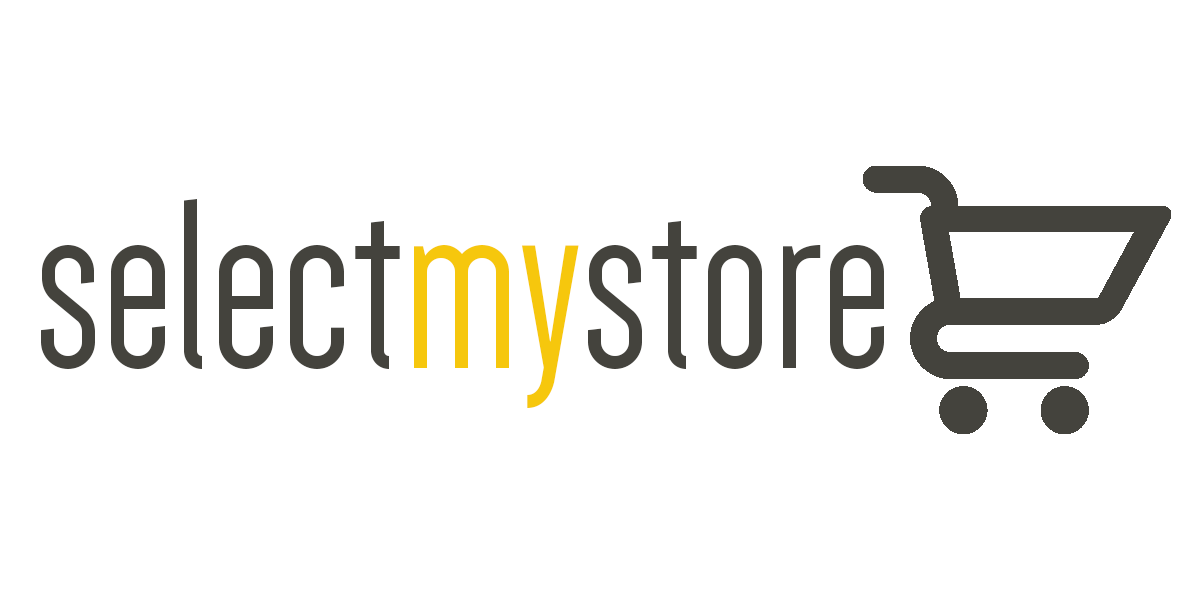
<style>
.page{position:relative;width:1200px;height:600px;background:#ffffff}
.page>*{position:absolute;margin:0}
.t1{font:250px "Dense-Regular";color:#44433d}
.t2{font:250px "Dense-Regular";color:#f6c70d}
</style>
<div class="page">
<p class="t1" style="left:41px;top:199px;width:843px;height:209px">select<span class="t2">my</span>store</p>
</div>
